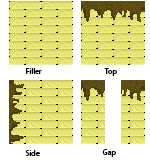
<style>
.page{position:relative;width:150px;height:160px;background:#ffffff}
.page>*{position:absolute;margin:0}
.t1{font:8px "MyriadPro-Regular";color:#000000}
</style>
<div class="page">
<p class="t1" style="left:26px;top:68px;width:16px;height:6px">Filler</p>
<p class="t1" style="left:104px;top:68px;width:13px;height:8px">Top</p>
<p class="t1" style="left:25px;top:150px;width:15px;height:6px">Side</p>
<p class="t1" style="left:102px;top:149px;width:14px;height:8px">Gap</p>
</div>
